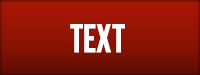
<style>
.page{position:relative;width:200px;height:75px}
.page>*{position:absolute;margin:0}
.t1{font:38.8px "BebasNeue";color:#ffffff;font-weight:bold;scale:0.87 1}
</style>
<div class="page">
<p class="t1" style="left:70px;top:24px;width:55px;height:29px">text</p>
</div>
